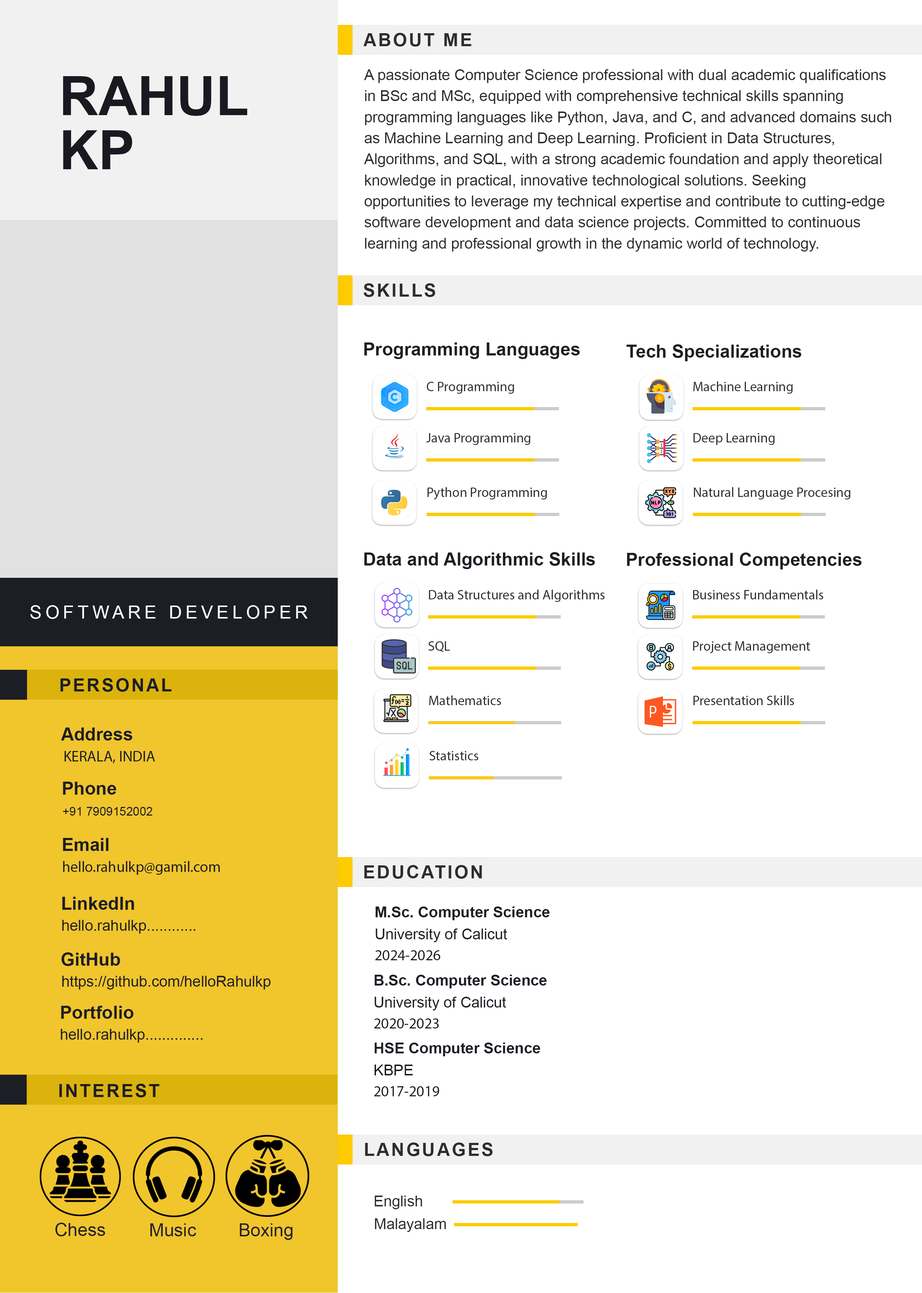
<style>
.page{position:relative;width:922px;height:1293px;background:#ffffff}
.page>*{position:absolute;margin:0}
.t1{font:18px "Arial-BoldMT";letter-spacing:0.1em;color:#2d2d2d;text-transform:uppercase}
.t2{font:54.1px/54.1px "Arial-BoldMT";color:#191a21;text-transform:uppercase}
.t3{font:15px/21.1px "ArialMT";color:#2d2d2d}
.t4{font:18px "Arial-BoldMT";color:#1c1e25}
.t5{font:13.5px "MyriadPro-Regular";color:#2d2d2d}
.t6{font:18px "ArialMT";letter-spacing:0.2em;color:#ffffff;text-transform:uppercase}
.t7{font:18px "Arial-BoldMT";letter-spacing:0.1em;color:#1c1e25;text-transform:uppercase}
.t8{font:15px "MyriadPro-Regular";color:#1c1e25}
.t9{font:12px "ArialMT";color:#1c1e25}
.t10{font:15px "Arial-BoldMT";color:#1c1e25}
.t11{font:15px "ArialMT";color:#1c1e25}
.t12{font:15px/21.1px "ArialMT";color:#1c1e25}
.t13{font:15px/21.1px "MyriadPro-Regular";color:#1c1e25}
.t14{font:15px "ArialMT";color:#2d2d2d}
.t15{font:18px "ArialMT";color:#22222d}
</style>
<div class="page">
<p class="t1" style="left:363px;top:33px;width:108px;height:14px">about me</p>
<p class="t2" style="left:63px;top:76px;width:185px;height:93px">RAHUL<br>KP</p>
<p class="t3" style="left:364px;top:69px;width:527px;height:183px">A passionate Computer Science professional with dual academic qualifications in BSc and MSc, equipped with comprehensive technical skills spanning programming languages like Python, Java, and C, and advanced domains such as Machine Learning and Deep Learning. Proficient in Data Structures, Algorithms, and SQL, with a strong academic foundation and apply theoretical knowledge in practical, innovative technological solutions. Seeking opportunities to leverage my technical expertise and contribute to cutting-edge software development and data science projects. Committed to continuous learning and professional growth in the dynamic world of technology.</p>
<p class="t1" style="left:363px;top:283px;width:72px;height:14px">Skills</p>
<p class="t4" style="left:364px;top:343px;width:216px;height:16px">Programming Languages</p>
<p class="t4" style="left:627px;top:344px;width:175px;height:17px">Tech Specializations</p>
<p class="t5" style="left:427px;top:382px;width:87px;height:12px">C Programming</p>
<p class="t5" style="left:693px;top:381px;width:100px;height:13px">Machine Learning</p>
<p class="t5" style="left:426px;top:433px;width:105px;height:12px">Java Programming</p>
<p class="t5" style="left:693px;top:433px;width:82px;height:12px">Deep Learning</p>
<p class="t5" style="left:427px;top:487px;width:120px;height:13px">Python Programming</p>
<p class="t5" style="left:694px;top:487px;width:157px;height:12px">Natural Language Procesing</p>
<p class="t4" style="left:364px;top:552px;width:231px;height:17px">Data and Algorithmic Skills</p>
<p class="t4" style="left:627px;top:553px;width:235px;height:17px">Professional Competencies</p>
<p class="t5" style="left:429px;top:590px;width:176px;height:12px">Data Structures and Algorithms</p>
<p class="t5" style="left:693px;top:590px;width:131px;height:9px">Business Fundamentals</p>
<p class="t6" style="left:30px;top:605px;width:278px;height:14px">SOFTWARE DEVELOPER</p>
<p class="t5" style="left:428px;top:641px;width:22px;height:11px">SQL</p>
<p class="t5" style="left:693px;top:641px;width:117px;height:12px">Project Management</p>
<p class="t7" style="left:60px;top:678px;width:111px;height:14px">PERSONAL</p>
<p class="t5" style="left:429px;top:695px;width:72px;height:10px">Mathematics</p>
<p class="t5" style="left:693px;top:695px;width:101px;height:10px">Presentation Skills</p>
<p class="t4" style="left:61px;top:728px;width:71px;height:13px">Address</p>
<p class="t8" style="left:65px;top:751px;width:90px;height:12px">KERALA, INDIA</p>
<p class="t5" style="left:429px;top:751px;width:50px;height:9px">Statistics</p>
<p class="t4" style="left:63px;top:782px;width:53px;height:13px">Phone</p>
<p class="t9" style="left:63px;top:807px;width:89px;height:9px">+91 7909152002</p>
<p class="t4" style="left:63px;top:838px;width:46px;height:13px">Email</p>
<p class="t8" style="left:63px;top:861px;width:157px;height:14px">hello.rahulkp@gamil.com</p>
<p class="t1" style="left:364px;top:865px;width:118px;height:14px">EDUCATION</p>
<p class="t4" style="left:62px;top:897px;width:72px;height:13px">LinkedIn</p>
<p class="t10" style="left:375px;top:907px;width:175px;height:13px">M.Sc. Computer Science</p>
<p class="t11" style="left:62px;top:920px;width:133px;height:14px">hello.rahulkp............</p>
<p class="t12" style="left:375px;top:929px;width:132px;height:31px">University of Calicut<br><span class="t13">2024-2026</span></p>
<p class="t4" style="left:61px;top:952px;width:59px;height:14px">GitHub</p>
<p class="t11" style="left:62px;top:976px;width:209px;height:14px">https://github.com/helloRahulkp</p>
<p class="t10" style="left:375px;top:975px;width:172px;height:14px">B.Sc. Computer Science</p>
<p class="t12" style="left:374px;top:997px;width:132px;height:32px">University of Calicut<br><span class="t13">2020-2023</span></p>
<p class="t4" style="left:61px;top:1006px;width:73px;height:13px">Portfolio</p>
<p class="t11" style="left:61px;top:1029px;width:141px;height:14px">hello.rahulkp..............</p>
<p class="t10" style="left:375px;top:1043px;width:165px;height:13px">HSE Computer Science</p>
<p class="t13" style="left:374px;top:1065px;width:65px;height:31px"><span class="t12">KBPE<br></span>2017-2019</p>
<p class="t7" style="left:59px;top:1084px;width:101px;height:14px">INTEREST</p>
<p class="t1" style="left:365px;top:1143px;width:128px;height:13px">LANGUAGES</p>
<p class="t14" style="left:375px;top:1196px;width:47px;height:13px">English</p>
<p class="t15" style="left:55px;top:1223px;width:50px;height:13px">Chess</p>
<p class="t15" style="left:150px;top:1223px;width:46px;height:13px">Music</p>
<p class="t15" style="left:240px;top:1223px;width:53px;height:17px">Boxing</p>
<p class="t14" style="left:375px;top:1218px;width:71px;height:14px">Malayalam</p>
</div>
